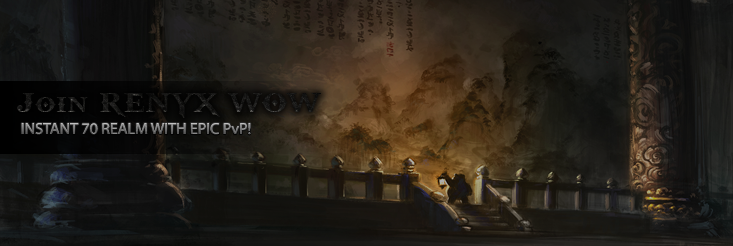
<style>
.page{position:relative;width:733px;height:246px}
.page>*{position:absolute;margin:0}
.t1{font:30px "GodOfWar";letter-spacing:0.02em;color:#171716}
.t2{font:16px "MyriadPro-Regular"}
</style>
<div class="page">
<p class="t1" style="left:17px;top:93px;width:304px;height:25px">Join RENYX WOW</p>
<p class="t2" style="left:21px;top:123px;width:230px;height:12px">INSTANT 70 REALM WITH EPIC PvP!</p>
</div>
